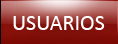
<style>
.page{position:relative;width:118px;height:44px}
.page>*{position:absolute;margin:0}
.t1{font:22px "Calibri";color:#ffffff}
</style>
<div class="page">
<p class="t1" style="left:13px;top:16px;width:92px;height:14px">USUARIOS</p>
</div>
